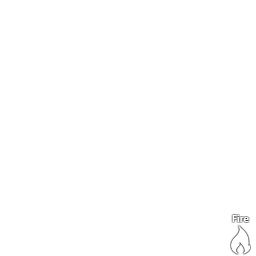
<style>
.page{position:relative;width:256px;height:256px;background:#ffffff}
.page>*{position:absolute;margin:0}
.t1{font:11px "Calibri-Bold";color:#ffffff}
</style>
<div class="page">
<p class="t1" style="left:232px;top:215px;width:17px;height:7px">Fire</p>
</div>
